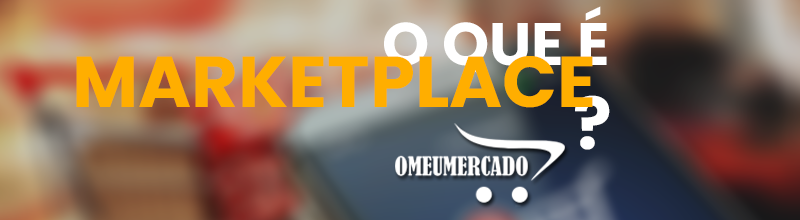
<style>
.page{position:relative;width:800px;height:220px}
.page>*{position:absolute;margin:0}
.t1{font:60px "Poppins-Bold";color:#ffffff}
.t2{font:72px "Poppins-Bold";color:#ffae00}
.t3{font:72px "Poppins-Bold";color:#ffffff}
</style>
<div class="page">
<p class="t1" style="left:384px;top:6px;width:223px;height:67px">O QUE É</p>
<p class="t2" style="left:76px;top:56px;width:517px;height:52px">MARKETPLACE</p>
<p class="t3" style="left:575px;top:95px;width:35px;height:55px">?</p>
</div>
